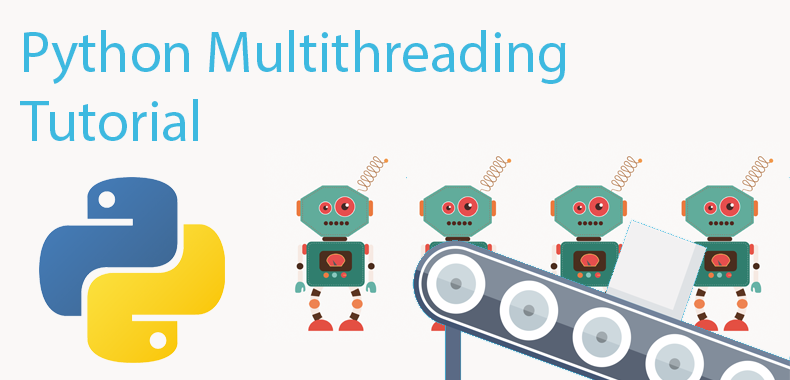
<style>
.page{position:relative;width:790px;height:380px;background:#faf8f7}
.page>*{position:absolute;margin:0}
.t1{font:58.1px "MyriadPro-Regular";color:#3db9e0}
</style>
<div class="page">
<p class="t1" style="left:20px;top:30px;width:546px;height:111px">Python Multithreading<br>Tutorial</p>
</div>
